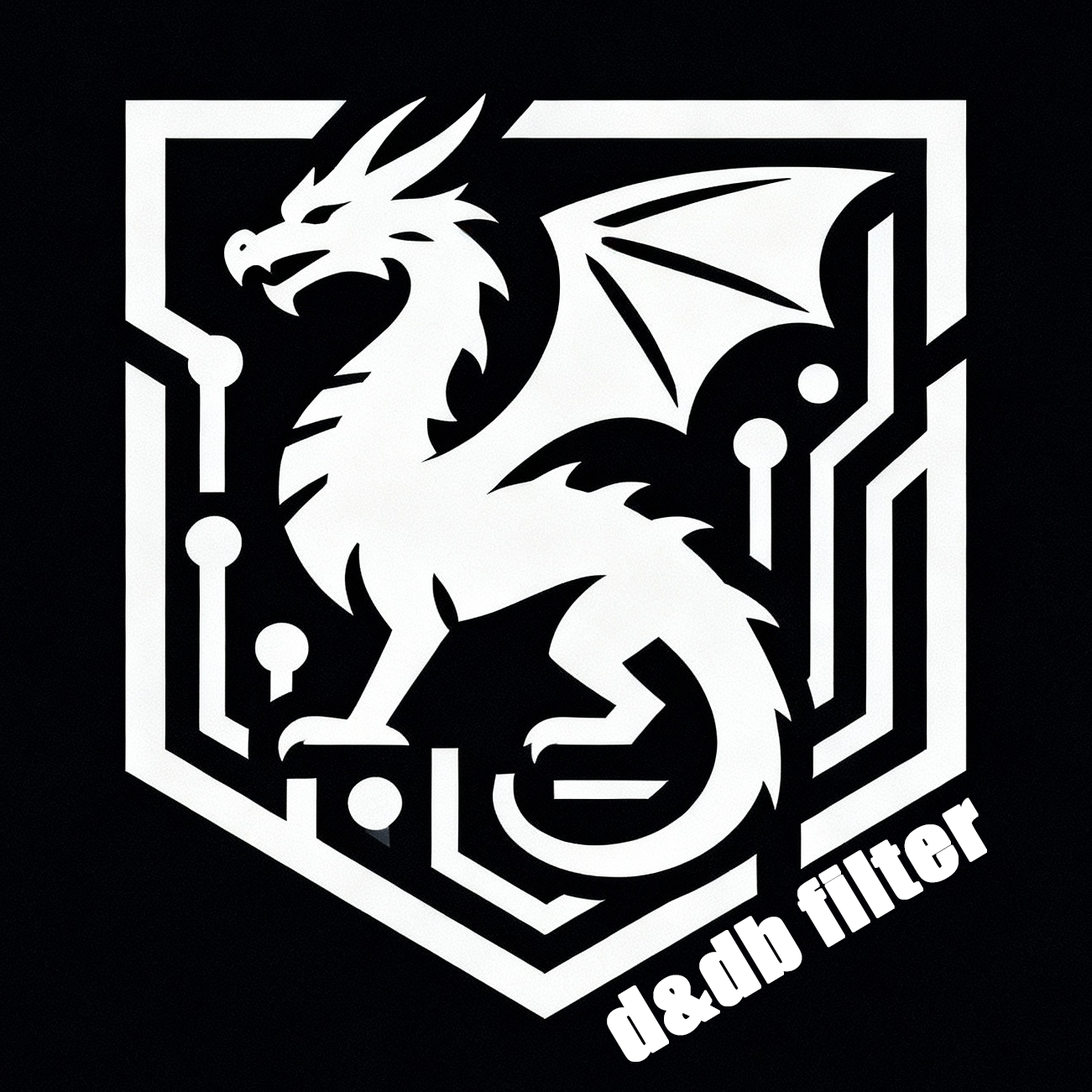
<style>
.page{position:relative;width:1092px;height:1092px}
.page>*{position:absolute;margin:0}
.t1{font:82.3px "Impact";color:#ffffff;font-weight:bold;scale:1.13 1}
</style>
<div class="page">
<p class="t1" style="left:607px;top:797px;width:380px;height:265px;rotate:-31deg">d&amp;db filter</p>
</div>
